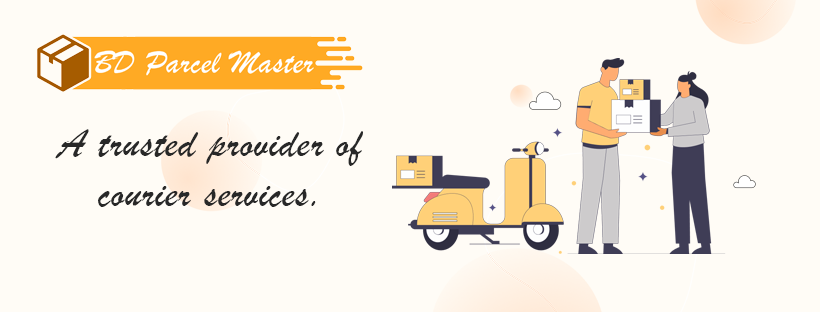
<style>
.page{position:relative;width:820px;height:312px;background:#fffcf6}
.page>*{position:absolute;margin:0}
.t1{font:42px "BrushScriptMT";letter-spacing:0.02em;color:#282828}
</style>
<div class="page">
<p class="t1" style="left:55px;top:129px;width:308px;height:78px;text-align:center">A trusted provider of courier services.</p>
</div>
